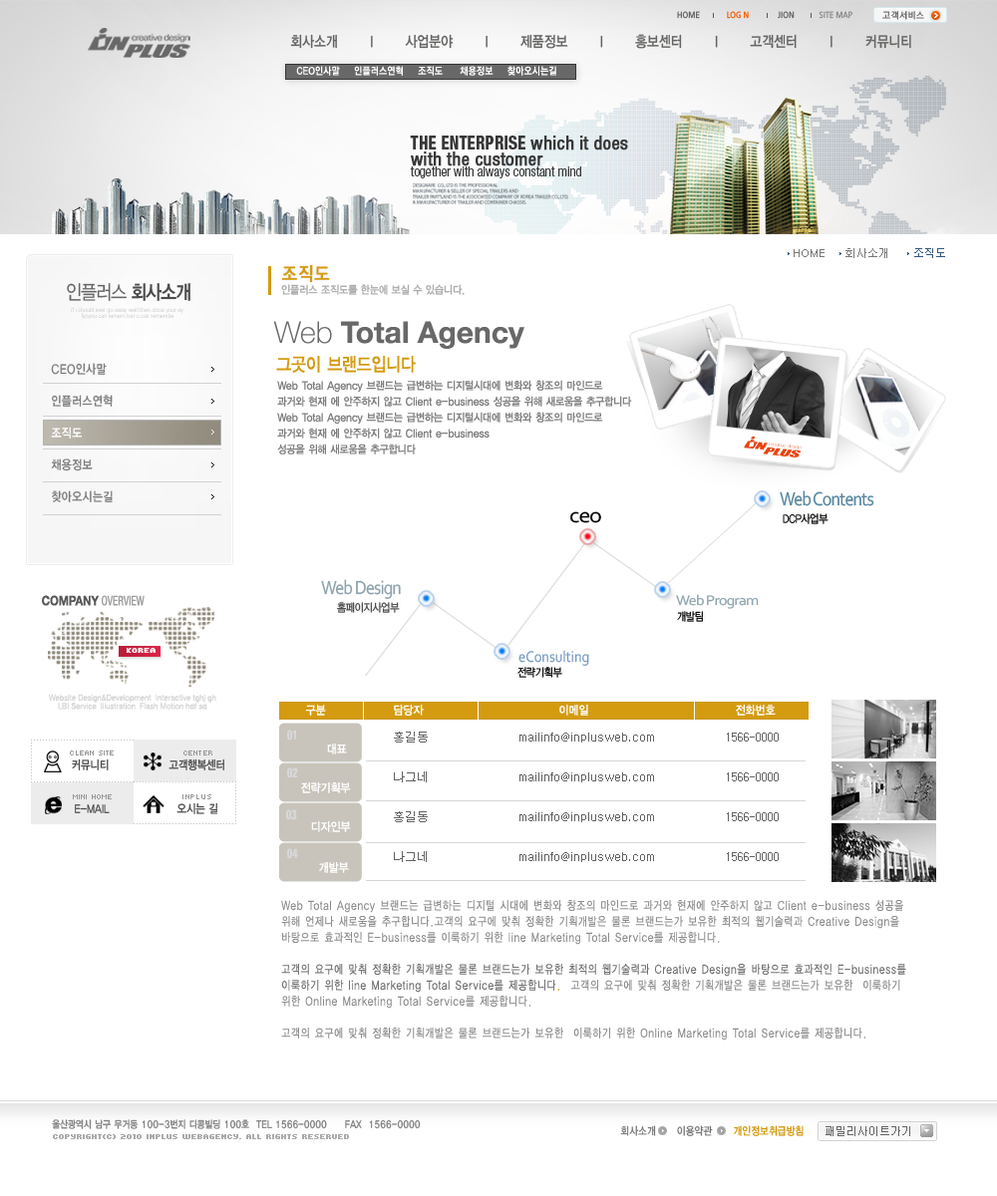
<style>
.page{position:relative;width:997px;height:1196px;background:#ffffff}
.page>*{position:absolute;margin:0}
.t1{font:9px "Moebius";color:#8d8c8c;text-transform:uppercase;scale:0.9 1}
.t2{font:9px "Moebius";color:#636363;text-transform:uppercase;scale:0.9 1}
.t3{font:9px "Moebius";color:#f55d00;text-transform:uppercase;scale:0.9 1}
.t4{font:9px "YGO530";letter-spacing:0.04em;color:#656565}
.t5{font:15px "YGO33";letter-spacing:-0.075em;color:#646362;scale:0.85 1}
.t6{font:10px "YGO540";letter-spacing:0.02em;color:#ffffff;scale:0.9 1}
.t7{font:18.5px/16.4px "HelveticaNeue-Condensed";color:#373737;font-weight:bold}
.t8{font:18.5px/16.4px "HelveticaNeue-HeavyCond";color:#373737;text-transform:uppercase;scale:0.9 1}
.t9{font:13.7px "HelveticaNeue-LightCond";color:#373737}
.t10{font:11px "Dotum";color:#777777}
.t11{font:11px "Dotum";color:#345680}
.t12{font:18.8px "YGO33";letter-spacing:-0.025em;color:#d49b11;font-weight:bold;scale:0.86 1}
.t13{font:19.9px "YDIYGO320";letter-spacing:-0.045em;color:#656565;text-transform:uppercase;scale:0.86 1}
.t14{font:19.9px "YDIYGO340";letter-spacing:-0.045em;color:#4c4c4c;text-transform:uppercase;scale:0.86 1}
.t15{font:11px "YDIYGO330";color:#adadad;scale:0.9 1}
.t16{font:6px/6px "Univers-Light";scale:0.9 1}
.t17{font:29.9px "HelveticaNeue-Bold";color:#686868}
.t18{font:29.9px "HelveticaNeue-Thin";color:#686868}
.t19{font:12.6px/31.9px "YGO33";letter-spacing:-0.04em;color:#7c7c7c;scale:0.86 1}
.t20{font:12.6px/31.9px "YGO33";letter-spacing:-0.04em;color:#ffffff;scale:0.86 1}
.t21{font:18.8px "YGO33";letter-spacing:-0.09em;color:#d49b11;scale:0.86 1}
.t22{font:11px/15.9px "YGO33";letter-spacing:-0.09em;color:#808080;scale:0.9 1}
.t23{font:19.9px "Corbel";letter-spacing:-0.05em;color:#5787a0;scale:0.9 1}
.t24{font:21.5px "Corbel";letter-spacing:-0.05em;color:#000000;scale:1.11 1}
.t25{font:11.5px "YDIYGO320";letter-spacing:-0.025em;color:#000000;scale:0.86 1}
.t26{font:19.9px "Corbel";letter-spacing:-0.05em;color:#8da2ac;scale:0.9 1}
.t27{font:13.1px "HelveticaNeue-Condensed";color:#9c9c9c;scale:0.85 1}
.t28{font:13.1px "HelveticaNeue-Bold";color:#585858;scale:0.85 1}
.t29{font:11.5px "YDIYGO320";letter-spacing:-0.025em;color:#434343;scale:0.86 1}
.t30{font:14.4px "Corbel";letter-spacing:-0.05em;color:#8da2ac;scale:1.11 1}
.t31{font:8.1px "Kroeger0555";color:#ffffff;font-weight:bold}
.t32{font:15.9px "Corbel";color:#799cc1;scale:0.9 1}
.t33{font:8.4px/8.4px "HelveticaNeue-Roman";color:#d4d4d4;scale:0.9 1}
.t34{font:12px "YDIYGO330";color:#ffffff;scale:0.9 1}
.t35{font:13.2px "Univers-CondensedBold";letter-spacing:0.025em;color:#d8d8d8;scale:0.86 1}
.t36{font:12px/39.9px "Dotum";color:#626262}
.t37{font:8px "Kroeger0556";letter-spacing:-0.1em;color:#989898}
.t38{font:12px "YDIYGO330";color:#4c4c4c;scale:0.85 1}
.t39{font:8px "Kroeger0556";letter-spacing:-0.1em;color:#989898;text-transform:uppercase}
.t40{font:8px "Kroeger0556";letter-spacing:-0.04em;color:#989898}
.t41{font:12px "YDIYGO330";color:#4c4c4c;text-transform:uppercase;scale:0.85 1}
.t42{font:12px/15.9px "YGO32";color:#8d8d8d;scale:0.8 1}
.t43{font:12px/15.9px "YGO32";color:#727070;scale:0.8 1}
.t44{font:12px/15.9px "YGO32";color:#d49b11;scale:0.8 1}
.t45{font:10px "YGO33";letter-spacing:-0.075em;color:#828282;scale:0.85 1}
.t46{font:11px "YGO33";letter-spacing:-0.05em;color:#757575;scale:0.85 1}
.t47{font:11px "YGO33";letter-spacing:-0.05em;color:#d19400;scale:0.85 1}
.t48{font:11px "Dotum";color:#656565}
.t49{font:8px "Kroeger0555";color:#aaaaaa;font-weight:bold}
</style>
<div class="page">
<p class="t1" style="left:677px;top:11px;width:175px;height:8px"><span class="t2">Home             </span><span class="t3">Log n              </span><span class="t2">Jion</span>            Site map</p>
<p class="t4" style="left:882px;top:11px;width:42px;height:9px">고객서비스</p>
<p class="t5" style="left:290px;top:34px;width:621px;height:15px">회사소개      l      사업분야      l      제품정보      l      홍보센터      l      고객센터      l      커뮤니티</p>
<p class="t6" style="left:296px;top:66px;width:260px;height:10px">CEO인사말     인플러스연혁     조직도      채용정보     찾아오시는길</p>
<p class="t7" style="left:410px;top:136px;width:218px;height:30px"><span class="t8"><br>The enterprise </span>which it does<br>with the customer</p>
<p class="t9" style="left:410px;top:166px;width:171px;height:12px">together with always constant mind</p>
<p class="t10" style="left:793px;top:248px;width:152px;height:10px">HOME     회사소개      <span class="t11">조직도</span></p>
<p class="t12" style="left:281px;top:264px;width:49px;height:19px">조직도</p>
<p class="t13" style="left:67px;top:283px;width:123px;height:18px">인플러스 <span class="t14">회사소개</span></p>
<p class="t15" style="left:281px;top:284px;width:184px;height:11px">인플러스 조직도를 한눈에 보실 수 있습니다.</p>
<p class="t16" style="left:71px;top:307px;width:112px;height:13px;text-align:center">if i should ever go away well then close your ey<br>fyoyou can remem ber u can remembe</p>
<p class="t17" style="left:273px;top:321px;width:251px;height:28px"><span class="t18">Web </span>Total Agency</p>
<p class="t19" style="left:51px;top:363px;width:62px;height:139px">CEO인사말<br>인플러스연혁<br><span class="t20">조직도<br></span>채용정보<br>찾아오시는길</p>
<p class="t21" style="left:276px;top:356px;width:140px;height:17px">그곳이 브랜드입니다</p>
<p class="t22" style="left:277px;top:380px;width:355px;height:75px">Web Total Agency 브랜드는 급변하는 디지털시대에 변화와 창조의 마인드로<br>과거와 현재 에 안주하지 않고 Client e-business 성공을 위해 새로움을 추구합니다<br>Web Total Agency 브랜드는 급변하는 디지털시대에 변화와 창조의 마인드로<br>과거와 현재 에 안주하지 않고 Client e-business <br>성공을 위해 새로움을 추구합니다</p>
<p class="t23" style="left:780px;top:490px;width:94px;height:16px">Web Contents</p>
<p class="t24" style="left:570px;top:511px;width:31px;height:12px">ceo</p>
<p class="t25" style="left:783px;top:513px;width:45px;height:11px">DCP사업부</p>
<p class="t26" style="left:321px;top:579px;width:80px;height:20px">Web Design</p>
<p class="t27" style="left:42px;top:595px;width:103px;height:11px"><span class="t28">COMPANY</span> OVERVIEW</p>
<p class="t29" style="left:337px;top:602px;width:63px;height:11px">홈페이지사업부</p>
<p class="t30" style="left:676px;top:594px;width:83px;height:15px">Web Program</p>
<p class="t25" style="left:677px;top:611px;width:26px;height:11px">개발팀</p>
<p class="t31" style="left:127px;top:648px;width:29px;height:5px">korea</p>
<p class="t32" style="left:518px;top:650px;width:71px;height:16px">eConsulting</p>
<p class="t25" style="left:517px;top:667px;width:45px;height:11px">전략기획부</p>
<p class="t33" style="left:48px;top:694px;width:168px;height:17px;text-align:center">Website Design&amp;Development  Interactive tghj gh<br>I,BI Service  Illustration  Flash Motion hdf sd</p>
<p class="t34" style="left:305px;top:705px;width:471px;height:11px">구분                  담당자                                    이메일                                       전화번호</p>
<p class="t35" style="left:287px;top:730px;width:9px;height:11px">01</p>
<p class="t36" style="left:394px;top:732px;width:34px;height:130px">홍길동<br>나그네<br>홍길동<br>나그네</p>
<p class="t36" style="left:519px;top:733px;width:135px;height:129px">mailinfo@inplusweb.com<br>mailinfo@inplusweb.com<br>mailinfo@inplusweb.com<br>mailinfo@inplusweb.com</p>
<p class="t36" style="left:727px;top:733px;width:52px;height:128px">1566-0000<br>1566-0000<br>1566-0000<br>1566-0000</p>
<p class="t34" style="left:327px;top:744px;width:20px;height:11px">대표</p>
<p class="t37" style="left:70px;top:751px;width:44px;height:5px">CLEAN SITE</p>
<p class="t38" style="left:72px;top:759px;width:37px;height:12px">커뮤니티</p>
<p class="t38" style="left:168px;top:759px;width:56px;height:13px">고객행복센터</p>
<p class="t39" style="left:183px;top:751px;width:29px;height:5px">center</p>
<p class="t35" style="left:287px;top:768px;width:11px;height:11px">02</p>
<p class="t34" style="left:301px;top:783px;width:50px;height:10px">전략기획부</p>
<p class="t37" style="left:73px;top:794px;width:39px;height:5px">MINI HOME</p>
<p class="t40" style="left:182px;top:794px;width:29px;height:5px">INPLUS</p>
<p class="t41" style="left:75px;top:804px;width:35px;height:9px">E-mail</p>
<p class="t38" style="left:176px;top:802px;width:42px;height:12px">오시는 길</p>
<p class="t35" style="left:286px;top:809px;width:11px;height:11px">03</p>
<p class="t34" style="left:311px;top:821px;width:40px;height:11px">디자인부</p>
<p class="t35" style="left:287px;top:848px;width:11px;height:11px">04</p>
<p class="t34" style="left:319px;top:862px;width:30px;height:11px">개발부</p>
<p class="t42" style="left:281px;top:900px;width:625px;height:141px">Web Total Agency 브랜드는 급변하는 디지털 시대에 변화와 창조의 마인드로 과거와 현재에 안주하지 않고 Client e-business 성공을 위해 언제나 새로움을 추구합니다.고객의 요구에 맞춰 정확한 기획개발은 물론 브랜드는가 보유한 최적의 웹기술력과 Creative Design을 바탕으로 효과적인 E-business를 이룩하기 위한 line Marketing Total Service를 제공합니다.<br><span class="t43"><br>고객의 요구에 맞춰 정확한 기획개발은 물론 브랜드는가 보유한 최적의 웹기술력과 Creative Design을 바탕으로 효과적인 E-business를 이룩하기 위한 line Marketing Total Service를 제공합니다</span><span class="t44">.</span>  고객의 요구에 맞춰 정확한 기획개발은 물론 브랜드는가 보유한  이룩하기 위한 Online Marketing Total Service를 제공합니다.<br><br>고객의 요구에 맞춰 정확한 기획개발은 물론 브랜드는가 보유한  이룩하기 위한 Online Marketing Total Service를 제공합니다.</p>
<p class="t45" style="left:52px;top:1119px;width:369px;height:10px">울산광역시 남구 무거동 100-3번지 디콩빌딩 100호  TEL 1566-0000     FAX  1566-0000</p>
<p class="t46" style="left:620px;top:1125px;width:183px;height:11px">회사소개     이용약관    <span class="t47"> 개인정보취급방침</span></p>
<p class="t48" style="left:825px;top:1126px;width:85px;height:10px">패밀리사이트가기</p>
<p class="t49" style="left:53px;top:1134px;width:296px;height:5px">COPYRIGHT(C) 2010 INPLUS WEBAGENCY. ALL RIGHTS RESERVED</p>
</div>
